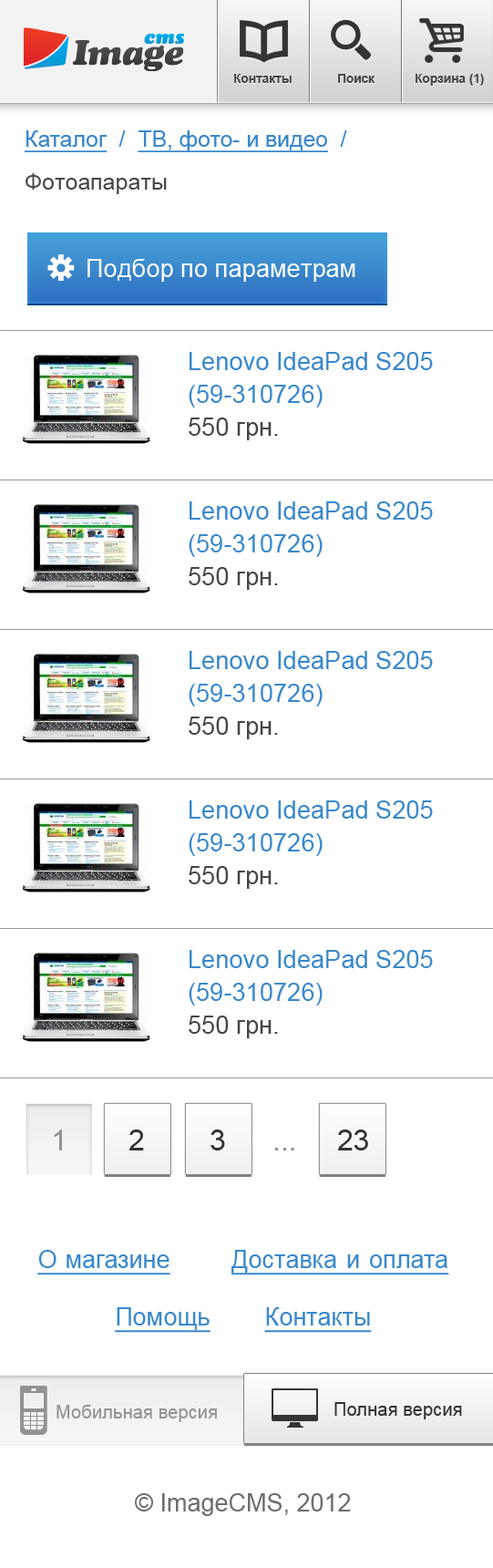
<style>
.page{position:relative;width:493px;height:1568px;background:#ffffff}
.page>*{position:absolute;margin:0}
.t1{font:12.4px "Arial-BoldMT";color:#474749}
.t2{font:22.6px/57.4px "ArialMT";color:#3a88cc;text-decoration:underline}
.t3{font:22.6px/57.4px "ArialMT";color:#3a88cc}
.t4{font:22.8px/43.1px "ArialMT";color:#474749}
.t5{font:24.9px "ArialMT";color:#ffffff}
.t6{font:24.9px/32.8px "ArialMT";color:#3a88cc}
.t7{font:24.9px/32.8px "ArialMT";color:#474749}
.t8{font:28.7px "ArialMT";color:#929292}
.t9{font:28.7px "ArialMT";color:#343434}
.t10{font:24.6px/57.4px "ArialMT";color:#3a88cc;text-decoration:underline}
.t11{font:18.5px "ArialMT";color:#929292}
.t12{font:18.5px "ArialMT";color:#343434}
.t13{font:24.6px "ArialMT";color:#6d6d6d}
</style>
<div class="page">
<p class="t1" style="left:234px;top:74px;width:58px;height:9px">Контакты</p>
<p class="t1" style="left:338px;top:74px;width:37px;height:9px">Поиск</p>
<p class="t1" style="left:416px;top:74px;width:68px;height:12px">Корзина (1)</p>
<p class="t2" style="left:25px;top:130px;width:322px;height:64px">Каталог<span class="t3">  /  </span>ТВ, фото- и видео<span class="t3">  /  </span><span class="t4">Фотоапараты</span></p>
<p class="t5" style="left:88px;top:259px;width:268px;height:23px">Подбор по параметрам</p>
<p class="t6" style="left:189px;top:352px;width:244px;height:88px">Lenovo IdeaPad S205 (59-310726)<br><span class="t7">550 грн.</span></p>
<p class="t6" style="left:189px;top:501px;width:244px;height:89px">Lenovo IdeaPad S205 (59-310726)<br><span class="t7">550 грн.</span></p>
<p class="t6" style="left:189px;top:651px;width:244px;height:88px">Lenovo IdeaPad S205 (59-310726)<br><span class="t7">550 грн.</span></p>
<p class="t6" style="left:189px;top:800px;width:244px;height:89px">Lenovo IdeaPad S205 (59-310726)<br><span class="t7">550 грн.</span></p>
<p class="t6" style="left:189px;top:950px;width:244px;height:88px">Lenovo IdeaPad S205 (59-310726)<br><span class="t7">550 грн.</span></p>
<p class="t8" style="left:54px;top:1130px;width:8px;height:20px">1</p>
<p class="t9" style="left:129px;top:1130px;width:15px;height:20px">2</p>
<p class="t9" style="left:211px;top:1130px;width:14px;height:20px">3</p>
<p class="t9" style="left:338px;top:1130px;width:30px;height:20px">23</p>
<p class="t8" style="left:274px;top:1148px;width:20px;height:2px">...</p>
<p class="t10" style="left:37px;top:1250px;width:412px;height:83px;text-align:center">Омагазине         Доставкаиоплата           <br>Помощь        Контакты</p>
<p class="t11" style="left:57px;top:1405px;width:160px;height:17px">Мобильная версия</p>
<p class="t12" style="left:335px;top:1402px;width:127px;height:17px">Полная версия</p>
<p class="t13" style="left:135px;top:1493px;width:216px;height:23px">© ImageCMS, 2012</p>
</div>
